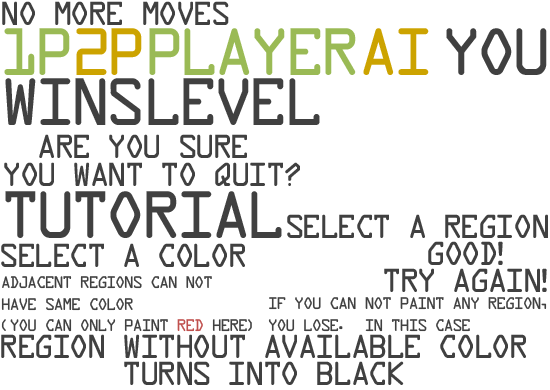
<style>
.page{position:relative;width:550px;height:390px;background:#ffffff}
.page>*{position:absolute;margin:0}
.t1{font:36px "DataControl";color:#404040}
.t2{font:72px "DataControl";color:#9aba55}
.t3{font:72px "DataControl";color:#cca300}
.t4{font:72px "DataControl";color:#404040}
.t5{font:18px "DataControl";color:#404040}
.t6{font:18px "DataControl";color:#c0504e}
</style>
<div class="page">
<p class="t1" style="left:2px;top:1px;width:227px;height:24px">NO MORE MOVES</p>
<p class="t2" style="left:4px;top:28px;width:66px;height:47px">1P</p>
<p class="t3" style="left:76px;top:28px;width:66px;height:47px">2P</p>
<p class="t2" style="left:149px;top:28px;width:207px;height:47px">PLAYER</p>
<p class="t3" style="left:363px;top:28px;width:66px;height:47px">AI</p>
<p class="t4" style="left:446px;top:28px;width:101px;height:47px">YOU</p>
<p class="t4" style="left:5px;top:78px;width:136px;height:47px">WINS</p>
<p class="t4" style="left:148px;top:78px;width:172px;height:47px">LEVEL</p>
<p class="t1" style="left:39px;top:134px;width:208px;height:24px">ARE YOU SURE</p>
<p class="t1" style="left:4px;top:162px;width:296px;height:24px">YOU WANT TO QUIT?</p>
<p class="t4" style="left:5px;top:191px;width:277px;height:47px">Tutorial</p>
<p class="t1" style="left:287px;top:214px;width:261px;height:24px">Select A Region</p>
<p class="t1" style="left:1px;top:243px;width:244px;height:24px">Select A Color</p>
<p class="t1" style="left:428px;top:241px;width:75px;height:24px">GooD!</p>
<p class="t1" style="left:384px;top:268px;width:163px;height:24px">Try Again!</p>
<p class="t5" style="left:1px;top:276px;width:251px;height:56px">adjacent regions can not<br>have same color<br>(You Can’only Paint <span class="t6">RED</span> here)</p>
<p class="t5" style="left:268px;top:297px;width:279px;height:35px">If You can not paint any Region,<br>You Lose.  In this case</p>
<p class="t1" style="left:1px;top:334px;width:525px;height:24px">region without available color</p>
<p class="t1" style="left:124px;top:361px;width:280px;height:24px">turns into black</p>
</div>
